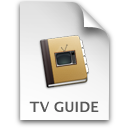
<style>
.page{position:relative;width:128px;height:128px;background:#ffffff}
.page>*{position:absolute;margin:0}
.t1{font:14px "LucidaGrande-Bold";color:#575757}
</style>
<div class="page">
<p class="t1" style="left:29px;top:101px;width:70px;height:11px">TV GUIDE</p>
</div>
